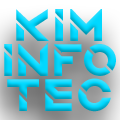
<style>
.page{position:relative;width:120px;height:120px}
.page>*{position:absolute;margin:0}
.t1{font:65.6px "QuantumRegular"}
</style>
<div class="page">
<p class="t1" style="left:16px;top:9px;width:86px;height:32px">kim</p>
<p class="t1" style="left:4px;top:43px;width:112px;height:33px">info</p>
<p class="t1" style="left:7px;top:78px;width:104px;height:34px">tec</p>
</div>
